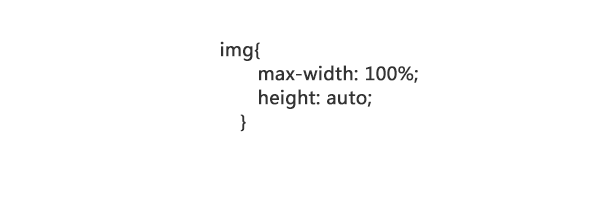
<style>
.page{position:relative;width:600px;height:200px;background:#ffffff}
.page>*{position:absolute;margin:0}
.t1{font:18px/24px "MicrosoftYaHei";color:#333333;font-weight:bold}
</style>
<div class="page">
<p class="t1" style="left:220px;top:41px;width:198px;height:91px;text-align:center">img{<br>   max-width: 100%;<br>   height: auto;<br>}</p>
</div>
